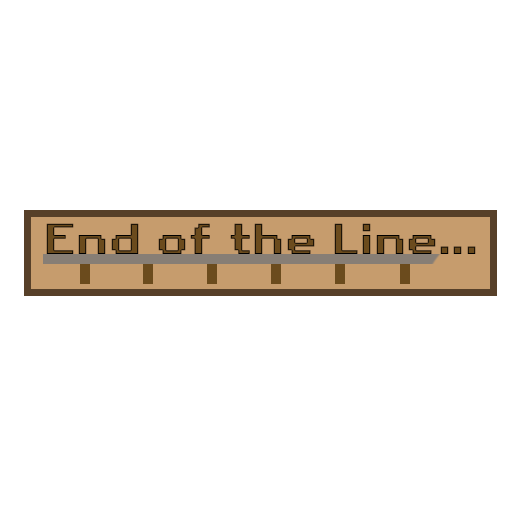
<style>
.page{position:relative;width:512px;height:512px;background:#ffffff}
.page>*{position:absolute;margin:0}
.t1{font:41.7px "RetroGaming"}
</style>
<div class="page">
<p class="t1" style="left:46px;top:223px;width:430px;height:31px">End of the Line...</p>
</div>
